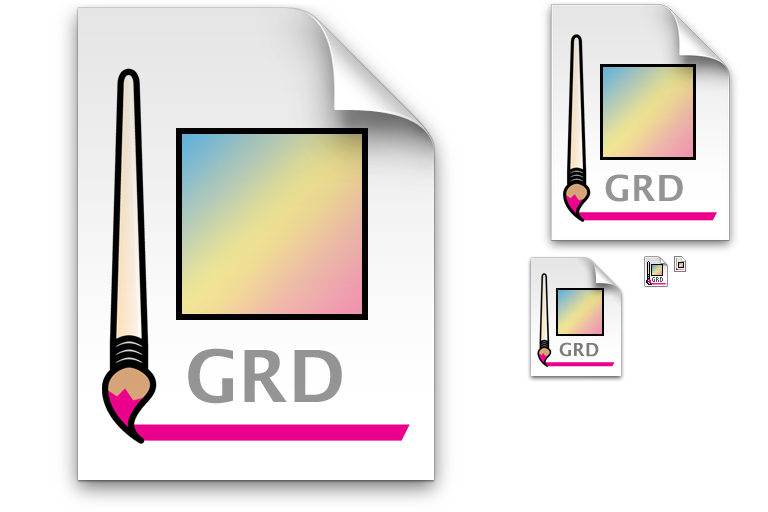
<style>
.page{position:relative;width:768px;height:512px;background:#ffffff}
.page>*{position:absolute;margin:0}
.t1{font:36px "LucidaGrande-Bold";color:#959595}
.t2{font:7px "KKFixed4x7";color:#555555}
.t3{font:18px "LucidaGrande-Bold";color:#7d7d7d}
.t4{font:72px "LucidaGrande-Bold";color:#959595}
</style>
<div class="page">
<p class="t1" style="left:605px;top:174px;width:78px;height:28px">GRD</p>
<p class="t2" style="left:652px;top:277px;width:11px;height:5px">GRD</p>
<p class="t3" style="left:559px;top:342px;width:40px;height:15px">GRD</p>
<p class="t4" style="left:188px;top:348px;width:154px;height:56px">GRD</p>
</div>
